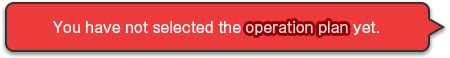
<style>
.page{position:relative;width:450px;height:58px;background:#ed3b3b}
.page>*{position:absolute;margin:0}
.t1{font:14px "GothicMB101Pro-Regular";color:#ffffff}
.t2{font:14px "GothicMB101Pro-Regular";color:#ffd3d3}
</style>
<div class="page">
<p class="t1" style="left:52px;top:21px;width:327px;height:14px">You have not selected the <span class="t2">operation plan</span> yet.</p>
<p class="t1" style="left:52px;top:21px;width:327px;height:14px">You have not selected the <span class="t2">operation plan</span> yet.</p>
</div>
